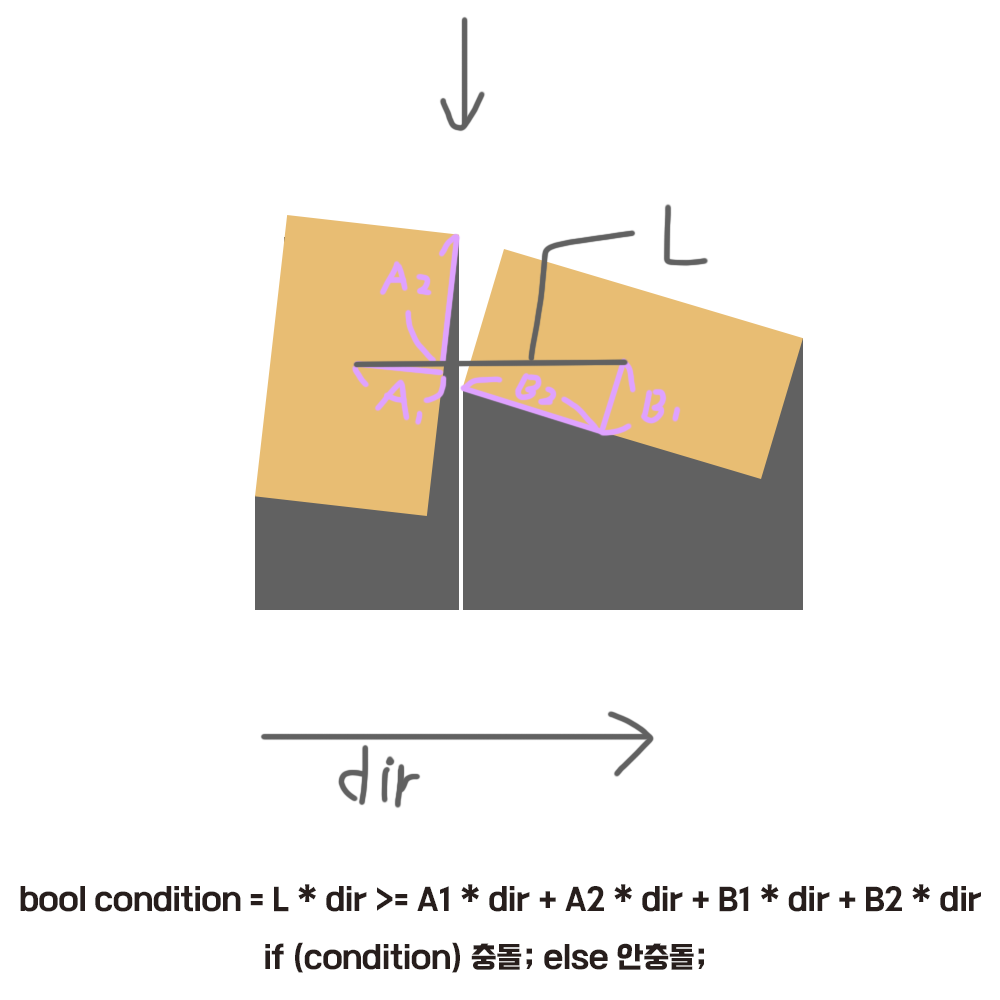
<style>
.page{position:relative;width:1000px;height:1000px;background:#ffffff}
.page>*{position:absolute;margin:0}
.t1{font:30px "Cafe24Ohsquare";color:#271e1c}
</style>
<div class="page">
<p class="t1" style="left:20px;top:884px;width:961px;height:28px">bool condition = L * dir &gt;= A1 * dir + A2 * dir + B1 * dir + B2 * dir</p>
<p class="t1" style="left:265px;top:942px;width:439px;height:31px">if (condition) 충돌; else 안충돌;</p>
</div>
